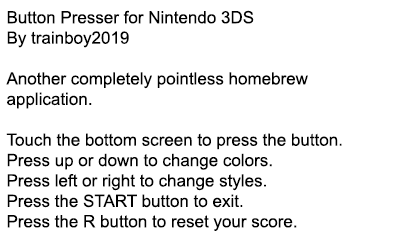
<style>
.page{position:relative;width:400px;height:240px;background:#ffffff}
.page>*{position:absolute;margin:0}
.t1{font:17px "ArialMT";color:#000000}
</style>
<div class="page">
<p class="t1" style="left:6px;top:10px;width:336px;height:221px">Button Presser for Nintendo 3DS<br>By trainboy2019<br><br>Another completely pointless homebrew<br>application.<br><br>Touch the bottom screen to press the button.<br>Press up or down to change colors.<br>Press left or right to change styles.<br>Press the START button to exit.<br>Press the R button to reset your score.</p>
</div>
